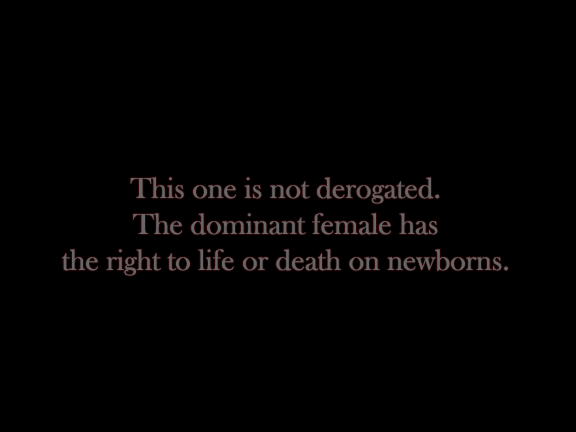
<style>
.page{position:relative;width:576px;height:432px;background:#000000}
.page>*{position:absolute;margin:0}
.t1{font:30px "BaskOldFace";color:#686666}
</style>
<div class="page">
<p class="t1" style="left:62px;top:177px;width:446px;height:99px;text-align:center">This one is not derogated. <br>The dominant female has <br>the right to life or death on newborns.</p>
</div>
